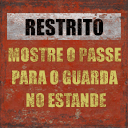
<style>
.page{position:relative;width:128px;height:128px}
.page>*{position:absolute;margin:0}
.t1{font:21px "Impact";color:#000000;text-transform:uppercase}
.t2{font:17.3px/22.7px "Impact";color:#c5b45b;text-transform:uppercase}
</style>
<div class="page">
<p class="t1" style="left:25px;top:18px;width:78px;height:18px">RESTRITO</p>
<p class="t2" style="left:8px;top:47px;width:113px;height:61px;text-align:center">mostre o passe <br>para o guarda <br>no estande</p>
</div>
